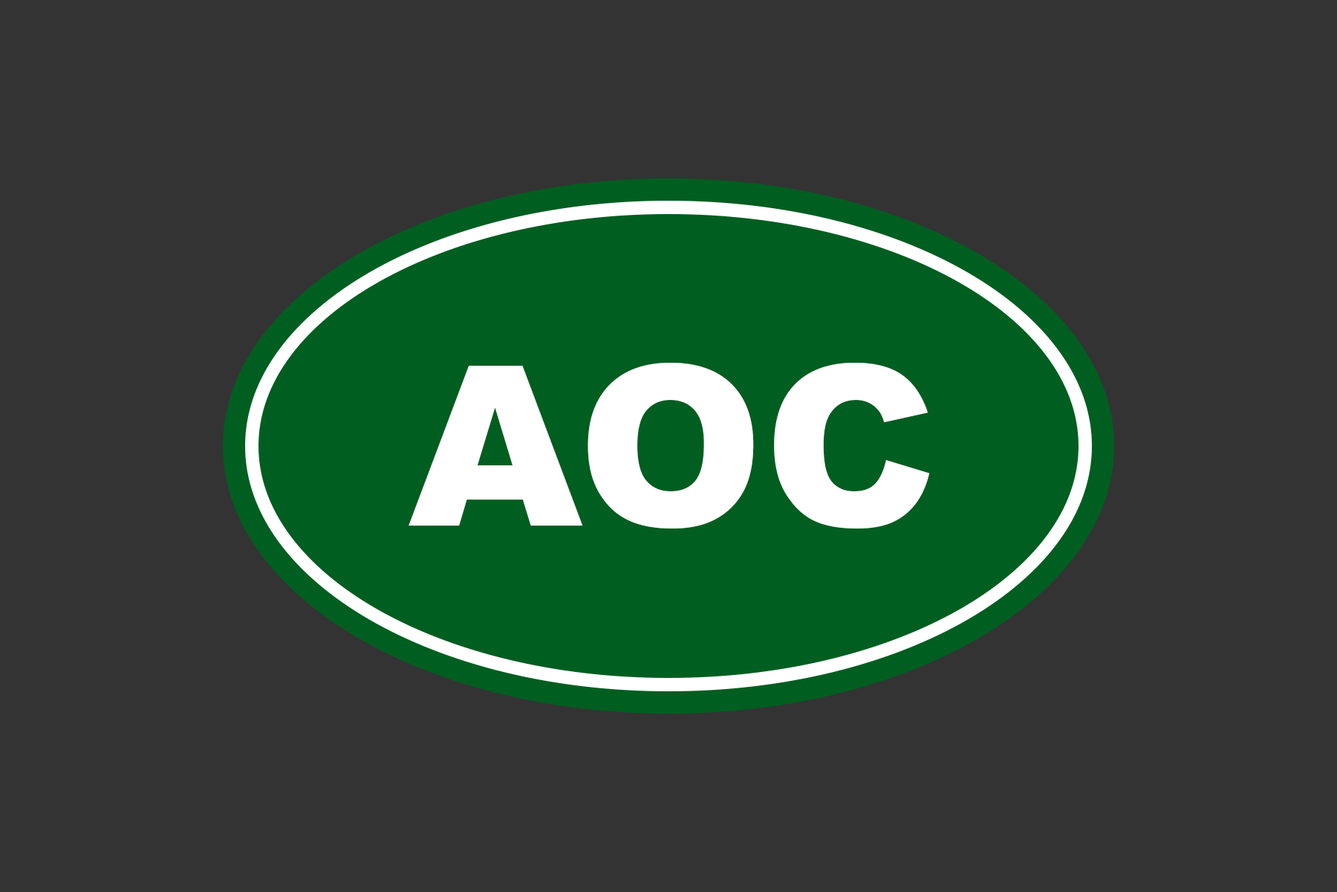
<style>
.page{position:relative;width:1337px;height:892px;background:#333333}
.page>*{position:absolute;margin:0}
.t1{font:222.9px "Arial-Black";color:#ffffff}
</style>
<div class="page">
<p class="t1" style="left:409px;top:363px;width:521px;height:165px">AOC</p>
</div>
